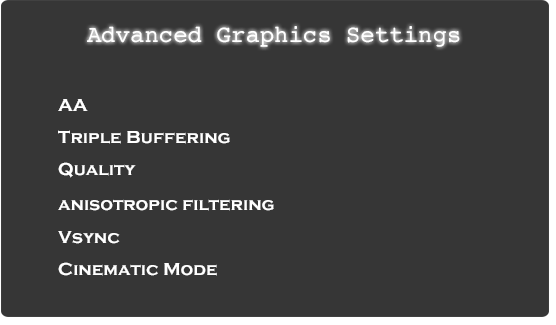
<style>
.page{position:relative;width:556px;height:325px;background:#363636}
.page>*{position:absolute;margin:0}
.t1{font:24px "Courier";color:#ffffff}
.t2{font:18px "CopperplateGothic-Bold";color:#ffffff}
</style>
<div class="page">
<p class="t1" style="left:87px;top:26px;width:373px;height:21px">Advanced Graphics Settings</p>
<p class="t2" style="left:58px;top:99px;width:30px;height:12px">AA</p>
<p class="t2" style="left:58px;top:130px;width:172px;height:14px">Triple Buffering</p>
<p class="t2" style="left:58px;top:162px;width:78px;height:16px">Quality</p>
<p class="t2" style="left:58px;top:199px;width:216px;height:12px">anisotropic filtering</p>
<p class="t2" style="left:58px;top:231px;width:62px;height:13px">Vsync</p>
<p class="t2" style="left:58px;top:262px;width:159px;height:14px">Cinematic Mode</p>
</div>
